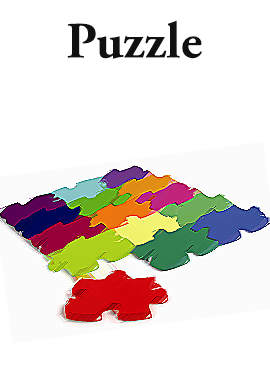
<style>
.page{position:relative;width:270px;height:381px;background:#ffffff}
.page>*{position:absolute;margin:0}
.t1{font:51.2px "AGaramondPro-Bold";color:#111111}
</style>
<div class="page">
<p class="t1" style="left:67px;top:20px;width:135px;height:39px">Puzzle</p>
</div>
